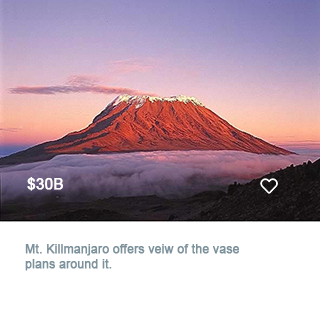
<style>
.page{position:relative;width:320px;height:309px;background:#ffffff}
.page>*{position:absolute;margin:0}
.t1{font:15px "ArialMT";color:#ffffff;font-weight:bold}
.t2{font:12px "ArialMT";color:#7b919c;font-weight:bold}
</style>
<div class="page">
<p class="t1" style="left:27px;top:177px;width:36px;height:14px">$30B</p>
<p class="t2" style="left:25px;top:244px;width:215px;height:27px">Mt. Killmanjaro offers veiw of the vase plans around it.</p>
</div>
